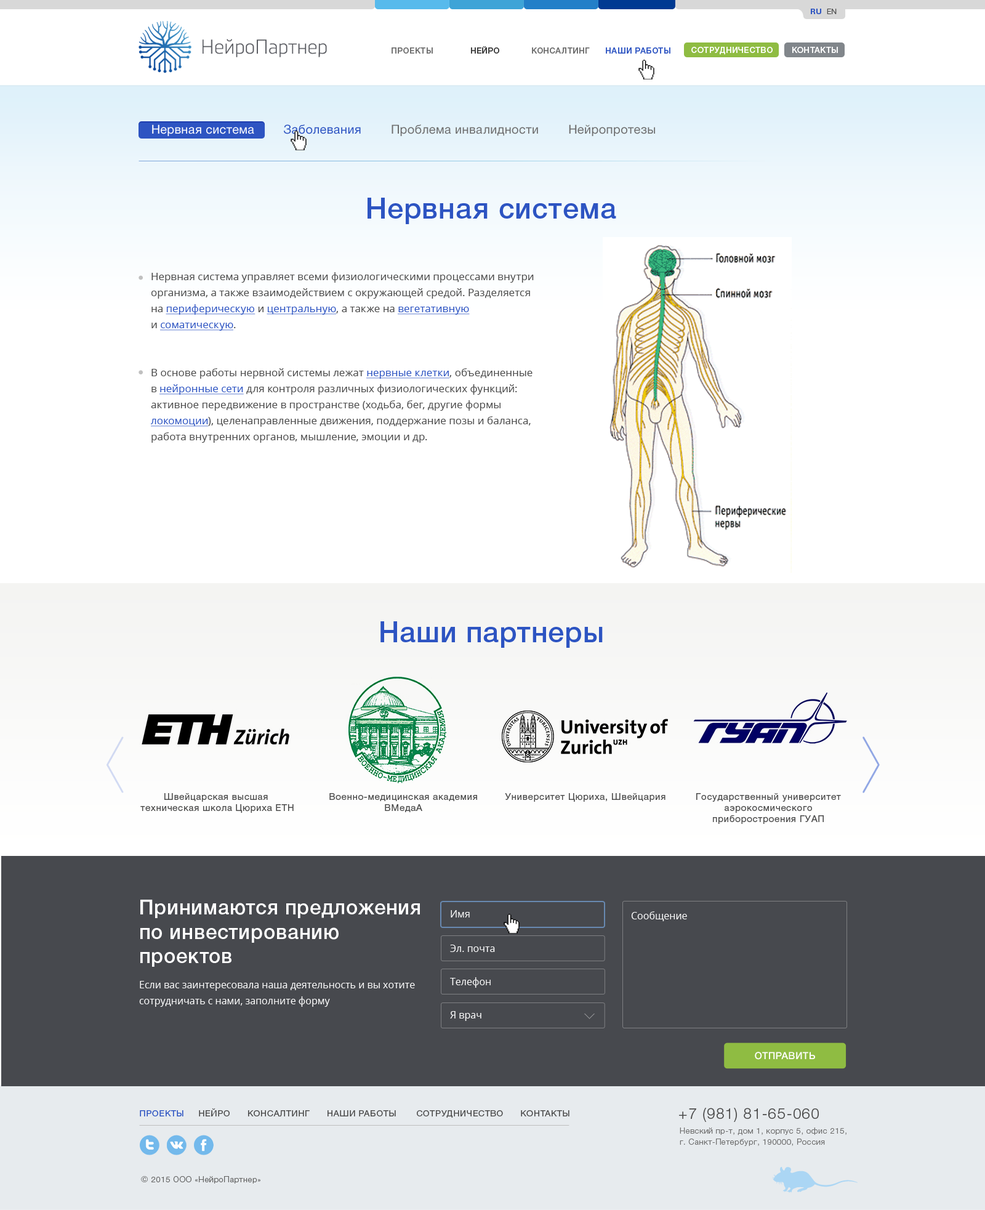
<style>
.page{position:relative;width:985px;height:1210px;background:#ffffff}
.page>*{position:absolute;margin:0}
.t1{font:7.4px "HelveticaNeueCyr-Bold";letter-spacing:0.05em;color:#2d54c2;text-transform:uppercase}
.t2{font:7.4px "HelveticaNeueCyr-Light";letter-spacing:0.05em;color:#4b4b4b;text-transform:uppercase}
.t3{font:8px "HelveticaNeueCyr-Medium";letter-spacing:0.05em;color:#2d54c2;text-transform:uppercase}
.t4{font:8px "HelveticaNeueCyr-Medium";letter-spacing:0.05em;color:#6d6d6d;text-transform:uppercase}
.t5{font:8px "HelveticaNeueCyr-Medium";letter-spacing:0.05em;color:#393939;text-transform:uppercase}
.t6{font:8px "HelveticaNeueCyr-Medium";letter-spacing:0.05em;color:#ffffff;text-transform:uppercase}
.t7{font:12.3px "HelveticaNeueCyr-Roman";letter-spacing:0.02em;color:#6d6d6d}
.t8{font:12.3px "HelveticaNeueCyr-Roman";letter-spacing:0.015em;color:#ffffff}
.t9{font:12.3px "HelveticaNeueCyr-Roman";letter-spacing:0.02em;color:#2d54c2}
.t10{font:28.9px "HelveticaNeueCyr-Medium";letter-spacing:0.02em;color:#2d54c2}
.t11{font:10.5px/16px "OpenSans";color:#4b4b4b}
.t12{font:10.5px/16px "OpenSans";color:#2d54c2;text-decoration:underline}
.t13{font:28.8px "HelveticaNeueCyr-Medium";letter-spacing:0.02em;color:#2d54c2}
.t14{font:9.2px "HelveticaNeueCyr-Roman";letter-spacing:0.05em;color:#4b4b4b}
.t15{font:20.3px "HelveticaNeueCyr-Medium";letter-spacing:0.02em;color:#ffffff}
.t16{font:9.9px "OpenSans";color:#ffffff}
.t17{font:9.9px/16px "OpenSans";color:#ffffff}
.t18{font:9.9px "HelveticaNeueCyr-Medium";letter-spacing:0.02em;color:#ffffff;text-transform:uppercase}
.t19{font:8.6px "HelveticaNeueCyr-Roman";letter-spacing:0.05em;color:#4b4b4b;text-transform:uppercase}
.t20{font:8.6px "HelveticaNeueCyr-Roman";letter-spacing:0.05em;color:#2d54c2;text-transform:uppercase}
.t21{font:15.1px "HelveticaNeueCyr-Light";letter-spacing:0.05em;color:#4b4b4b}
.t22{font:8px/11.1px "HelveticaNeueCyr-Light";letter-spacing:0.05em;color:#6f6f6f}
.t23{font:8px "HelveticaNeueCyr-Light";letter-spacing:0.05em;color:#636363}
.t24{font:8.6px "HelveticaNeueCyr-Roman";letter-spacing:0.05em;color:#636363}
</style>
<div class="page">
<p class="t1" style="left:811px;top:9px;width:26px;height:5px">Ru  <span class="t2">En</span></p>
<p class="t3" style="left:392px;top:46px;width:279px;height:8px"><span class="t4">Проекты             </span><span class="t5"> Нейро </span><span class="t4">           Консалтинг      </span>Наши работы</p>
<p class="t6" style="left:692px;top:47px;width:146px;height:8px">Сотрудничество       Контакты</p>
<p class="t7" style="left:152px;top:124px;width:503px;height:12px"><span class="t8">Нервная система        </span><span class="t9">Заболевания</span>        Проблема инвалидности        Нейропротезы</p>
<p class="t10" style="left:368px;top:198px;width:248px;height:26px">Нервная система</p>
<p class="t11" style="left:151px;top:272px;width:383px;height:171px">Нервная система управляет всеми физиологическими процессами внутри организма, а также взаимодействием с окружающей средой. Разделяется на <span class="t12">периферическую</span> и <span class="t12">центральную</span>, а также на <span class="t12">вегетативную</span> <br>и <span class="t12">соматическую</span>.<br><br><br>В основе работы нервной системы лежат <span class="t12">нервные клетки</span>, объединенные <br>в <span class="t12">нейронные сети</span> для контроля различных физиологических функций: активное передвижение в пространстве (ходьба, бег, другие формы <span class="t12">локомоции</span>), целенаправленные движения, поддержание позы и баланса, работа внутренних органов, мышление, эмоции и др.</p>
<p class="t13" style="left:381px;top:621px;width:222px;height:27px">Наши партнеры</p>
<p class="t14" style="left:140px;top:793px;width:154px;height:20px;text-align:center">Швейцарская высшая <br>техническая школа Цюриха ETH</p>
<p class="t14" style="left:329px;top:793px;width:148px;height:19px;text-align:center">Военно-медицинская академия<br>ВМедаА</p>
<p class="t14" style="left:505px;top:793px;width:161px;height:9px">Университет Цюриха, Швейцария</p>
<p class="t14" style="left:697px;top:793px;width:144px;height:31px;text-align:center">Государственный университет<br>аэрокосмического<br>приборостроения ГУАП</p>
<p class="t15" style="left:140px;top:900px;width:280px;height:67px">Принимаются предложения<br>по инвестированию<br>проектов</p>
<p class="t16" style="left:451px;top:910px;width:19px;height:8px">Имя</p>
<p class="t16" style="left:631px;top:911px;width:56px;height:10px">Сообщение</p>
<p class="t16" style="left:450px;top:945px;width:45px;height:7px">Эл. почта</p>
<p class="t16" style="left:450px;top:977px;width:41px;height:11px">Телефон</p>
<p class="t17" style="left:139px;top:981px;width:276px;height:26px">Если вас заинтересовала наша деятельность и вы хотите сотрудничать с нами, заполните форму</p>
<p class="t16" style="left:450px;top:1011px;width:32px;height:10px">Я врач</p>
<p class="t18" style="left:755px;top:1052px;width:60px;height:8px">отправить</p>
<p class="t19" style="left:140px;top:1108px;width:430px;height:10px"><span class="t20">Проекты</span>     Нейро      Консалтинг      Наши работы       Сотрудничество      Контакты</p>
<p class="t21" style="left:679px;top:1108px;width:140px;height:14px">+7 (981) 81-65-060</p>
<p class="t22" style="left:680px;top:1128px;width:167px;height:18px">Невский пр-т, дом 1, корпус 5, офис 215,<br>г. Санкт-Петербург, 190000, Россия</p>
<p class="t23" style="left:141px;top:1176px;width:120px;height:8px"><span class="t24">© </span>2015 ООО «НейроПартнер»</p>
</div>
